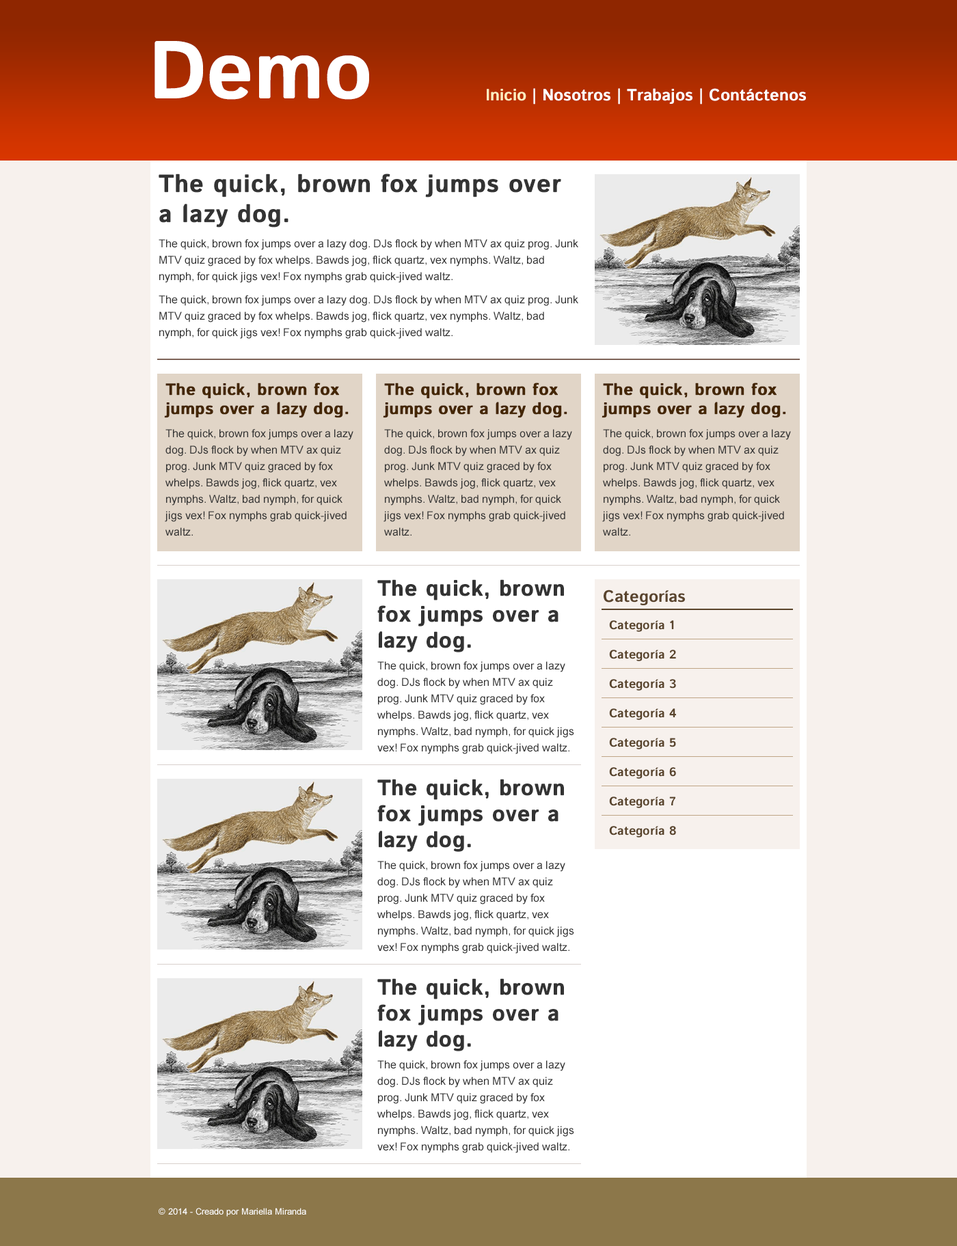
<style>
.page{position:relative;width:957px;height:1246px;background:#f7f1ed}
.page>*{position:absolute;margin:0}
.t1{font:82px "IstokWeb-Bold";color:#ffffff}
.t2{font:16.4px "IstokWeb-Bold";color:#ffffff}
.t3{font:16.4px "IstokWeb-Bold";color:#ffedbf}
.t4{font:24.6px/29.5px "IstokWeb-Bold";color:#333333;font-weight:bold}
.t5{font:10.9px/16.4px "ArialMT";color:#333333}
.t6{font:16.4px/19.7px "IstokWeb-Bold";color:#442603;font-weight:bold}
.t7{font:21.9px/26.2px "IstokWeb-Bold";color:#333333;font-weight:bold}
.t8{font:16.4px "IstokWeb-Bold";color:#5a442d}
.t9{font:12.3px "IstokWeb-Bold";color:#59442c}
.t10{font:8.9px "ArialMT";color:#fefefe}
</style>
<div class="page">
<p class="t1" style="left:154px;top:41px;width:215px;height:59px">Demo</p>
<p class="t2" style="left:487px;top:88px;width:319px;height:17px"><span class="t3">Inicio </span>| Nosotros | Trabajos | Contáctenos</p>
<p class="t4" style="left:159px;top:174px;width:402px;height:54px">The quick, brown fox jumps over a lazy dog.</p>
<p class="t5" style="left:159px;top:239px;width:419px;height:100px">The quick, brown fox jumps over a lazy dog. DJs flock by when MTV ax quiz prog. Junk MTV quiz graced by fox whelps. Bawds jog, flick quartz, vex nymphs. Waltz, bad nymph, for quick jigs vex! Fox nymphs grab quick-jived waltz.<br>The quick, brown fox jumps over a lazy dog. DJs flock by when MTV ax quiz prog. Junk MTV quiz graced by fox whelps. Bawds jog, flick quartz, vex nymphs. Waltz, bad nymph, for quick jigs vex! Fox nymphs grab quick-jived waltz.</p>
<p class="t6" style="left:164px;top:383px;width:185px;height:35px">The quick, brown fox jumps over a lazy dog.</p>
<p class="t6" style="left:383px;top:383px;width:184px;height:35px">The quick, brown fox jumps over a lazy dog.</p>
<p class="t6" style="left:601px;top:383px;width:185px;height:35px">The quick, brown fox jumps over a lazy dog.</p>
<p class="t5" style="left:165px;top:429px;width:188px;height:107px">The quick, brown fox jumps over a lazy dog. DJs flock by when MTV ax quiz prog. Junk MTV quiz graced by fox whelps. Bawds jog, flick quartz, vex nymphs. Waltz, bad nymph, for quick jigs vex! Fox nymphs grab quick-jived waltz.</p>
<p class="t5" style="left:383px;top:429px;width:189px;height:107px">The quick, brown fox jumps over a lazy dog. DJs flock by when MTV ax quiz prog. Junk MTV quiz graced by fox whelps. Bawds jog, flick quartz, vex nymphs. Waltz, bad nymph, for quick jigs vex! Fox nymphs grab quick-jived waltz.</p>
<p class="t5" style="left:602px;top:429px;width:189px;height:107px">The quick, brown fox jumps over a lazy dog. DJs flock by when MTV ax quiz prog. Junk MTV quiz graced by fox whelps. Bawds jog, flick quartz, vex nymphs. Waltz, bad nymph, for quick jigs vex! Fox nymphs grab quick-jived waltz.</p>
<p class="t7" style="left:377px;top:579px;width:187px;height:74px">The quick, brown fox jumps over a lazy dog.</p>
<p class="t8" style="left:603px;top:590px;width:82px;height:15px">Categorías</p>
<p class="t9" style="left:609px;top:620px;width:65px;height:12px">Categoría 1</p>
<p class="t9" style="left:609px;top:650px;width:67px;height:11px">Categoría 2</p>
<p class="t5" style="left:377px;top:661px;width:197px;height:93px">The quick, brown fox jumps over a lazy dog. DJs flock by when MTV ax quiz prog. Junk MTV quiz graced by fox whelps. Bawds jog, flick quartz, vex nymphs. Waltz, bad nymph, for quick jigs vex! Fox nymphs grab quick-jived waltz.</p>
<p class="t9" style="left:609px;top:679px;width:67px;height:12px">Categoría 3</p>
<p class="t9" style="left:609px;top:709px;width:67px;height:11px">Categoría 4</p>
<p class="t9" style="left:609px;top:738px;width:67px;height:12px">Categoría 5</p>
<p class="t9" style="left:609px;top:767px;width:67px;height:12px">Categoría 6</p>
<p class="t7" style="left:377px;top:779px;width:187px;height:73px">The quick, brown fox jumps over a lazy dog.</p>
<p class="t9" style="left:609px;top:797px;width:66px;height:11px">Categoría 7</p>
<p class="t9" style="left:609px;top:826px;width:67px;height:12px">Categoría 8</p>
<p class="t5" style="left:377px;top:861px;width:197px;height:93px">The quick, brown fox jumps over a lazy dog. DJs flock by when MTV ax quiz prog. Junk MTV quiz graced by fox whelps. Bawds jog, flick quartz, vex nymphs. Waltz, bad nymph, for quick jigs vex! Fox nymphs grab quick-jived waltz.</p>
<p class="t7" style="left:377px;top:979px;width:187px;height:73px">The quick, brown fox jumps over a lazy dog.</p>
<p class="t5" style="left:377px;top:1061px;width:197px;height:92px">The quick, brown fox jumps over a lazy dog. DJs flock by when MTV ax quiz prog. Junk MTV quiz graced by fox whelps. Bawds jog, flick quartz, vex nymphs. Waltz, bad nymph, for quick jigs vex! Fox nymphs grab quick-jived waltz.</p>
<p class="t10" style="left:159px;top:1208px;width:147px;height:9px">© 2014 - Creado por Mariella Miranda</p>
</div>
